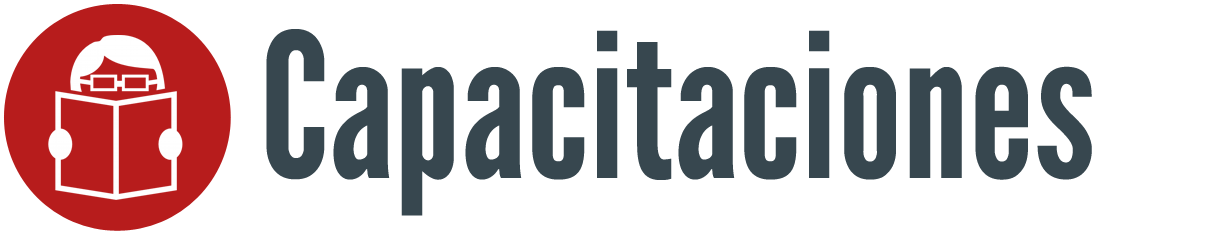
<style>
.page{position:relative;width:1229px;height:236px;background:#ffffff}
.page>*{position:absolute;margin:0}
.t1{font:200px "LeagueGothic-Regular";color:#37474f}
</style>
<div class="page">
<p class="t1" style="left:266px;top:29px;width:826px;height:187px">Capacitaciones</p>
</div>
